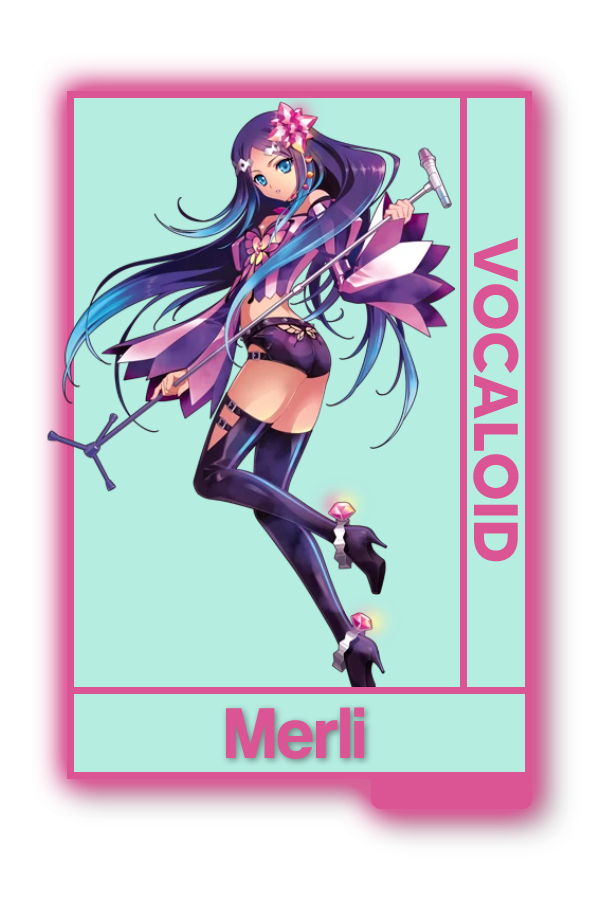
<style>
.page{position:relative;width:600px;height:900px;background:#b5ede1}
.page>*{position:absolute;margin:0}
.t1{font:62.5px "MADETOMMY-Bold";color:#db5493}
.t2{font:75px "CoolveticaRg-Regular";color:#db5493}
</style>
<div class="page">
<p class="t1" style="left:473px;top:237px;width:46px;height:325px;rotate:90deg">VOCALOID</p>
<p class="t2" style="left:225px;top:707px;width:139px;height:52px">Merli</p>
</div>
